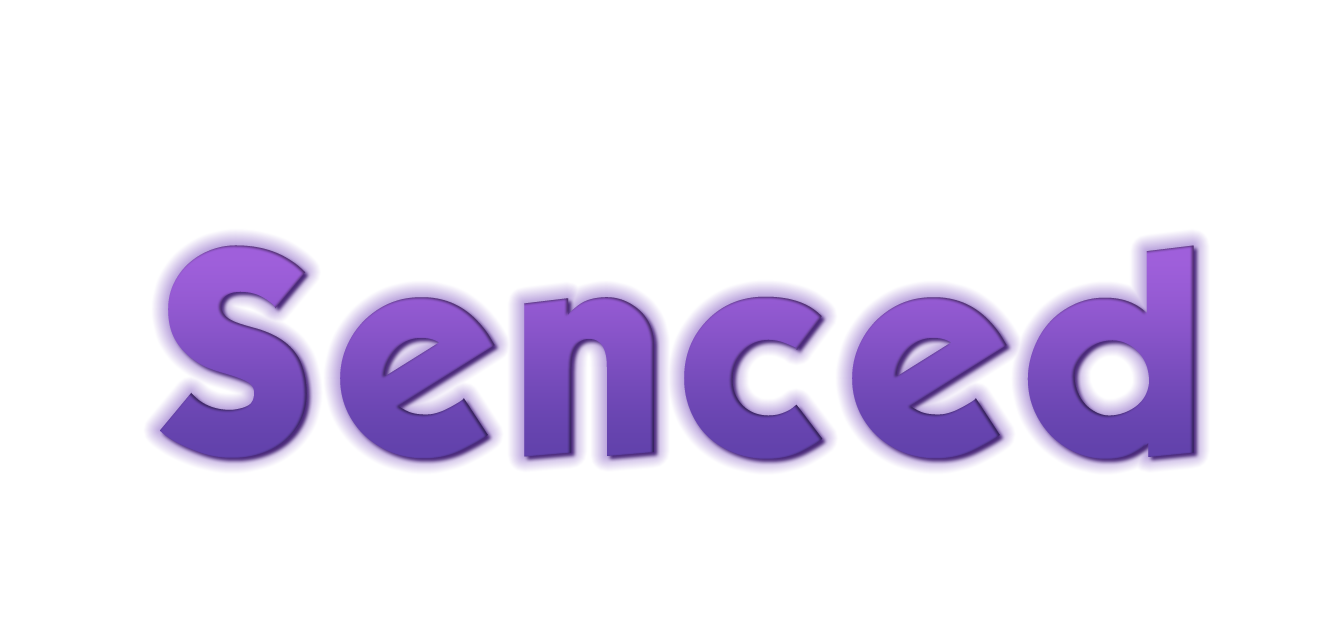
<style>
.page{position:relative;width:1330px;height:629px;background:#ffffff}
.page>*{position:absolute;margin:0}
.t1{font:250px "KabelBdNormal";letter-spacing:0.025em}
</style>
<div class="page">
<p class="t1" style="left:160px;top:245px;width:1034px;height:214px">Senced</p>
</div>
